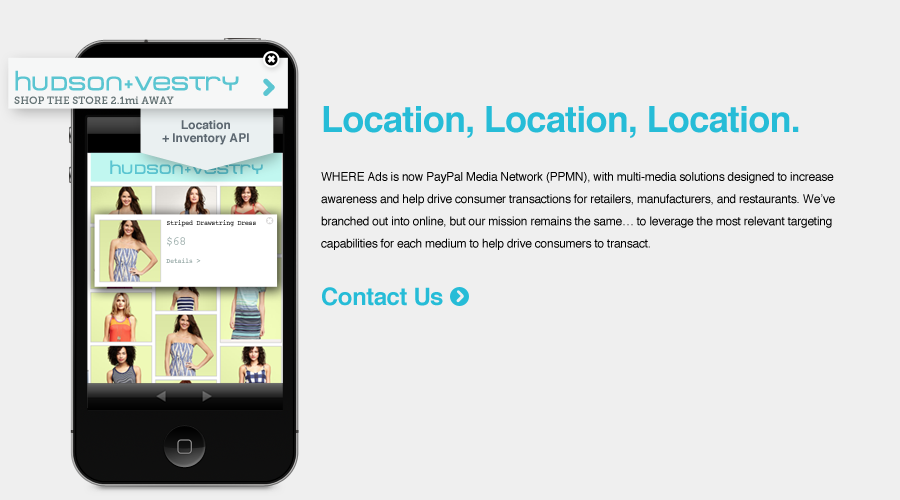
<style>
.page{position:relative;width:900px;height:500px;background:#efefef}
.page>*{position:absolute;margin:0}
.t1{font:36px "Helvetica-Bold";letter-spacing:-0.02em;color:#26bcd7}
.t2{font:12px/22.3px "Helvetica";letter-spacing:-0.02em;color:#000000}
.t3{font:24px "Helvetica-Bold";letter-spacing:-0.02em;color:#26bcd7}
</style>
<div class="page">
<p class="t1" style="left:323px;top:106px;width:476px;height:32px">Location, Location, Location.</p>
<p class="t2" style="left:321px;top:172px;width:514px;height:78px">WHERE Ads is now PayPal Media Network (PPMN), with multi-media solutions designed to increase awareness and help drive consumer transactions for retailers, manufacturers, and restaurants. We’ve branched out into online, but our mission remains the same… to leverage the most relevant targeting capabilities for each medium to help drive consumers to transact.</p>
<p class="t3" style="left:322px;top:287px;width:121px;height:19px">Contact Us</p>
</div>
